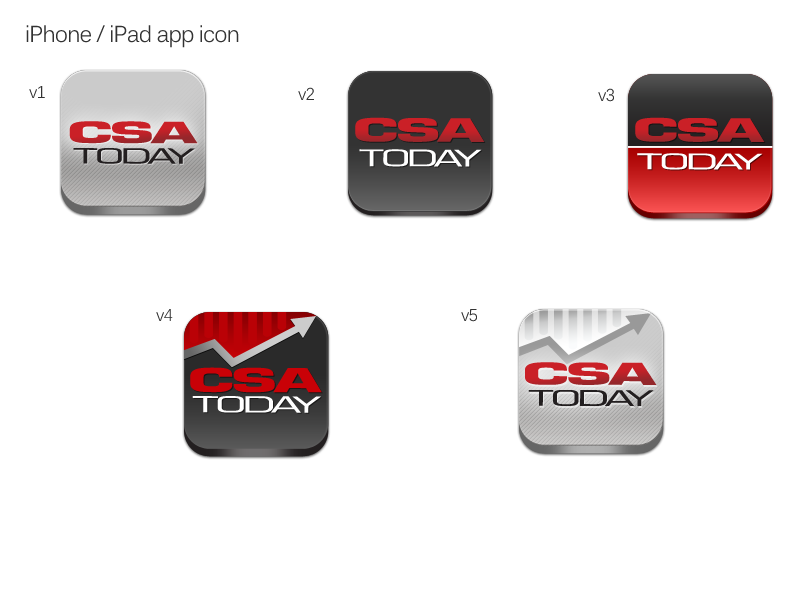
<style>
.page{position:relative;width:800px;height:600px;background:#ffffff}
.page>*{position:absolute;margin:0}
.t1{font:22.8px "Kalinga";letter-spacing:-0.04em;color:#333333;scale:0.95 1}
.t2{font:17.1px "Kalinga";letter-spacing:-0.04em;color:#333333;scale:0.95 1}
</style>
<div class="page">
<p class="t1" style="left:26px;top:25px;width:213px;height:23px">iPhone / iPad app icon</p>
<p class="t2" style="left:29px;top:86px;width:16px;height:12px">v1</p>
<p class="t2" style="left:298px;top:87px;width:16px;height:13px">v2</p>
<p class="t2" style="left:598px;top:88px;width:16px;height:14px">v3</p>
<p class="t2" style="left:156px;top:309px;width:17px;height:12px">v4</p>
<p class="t2" style="left:461px;top:309px;width:16px;height:13px">v5</p>
</div>
